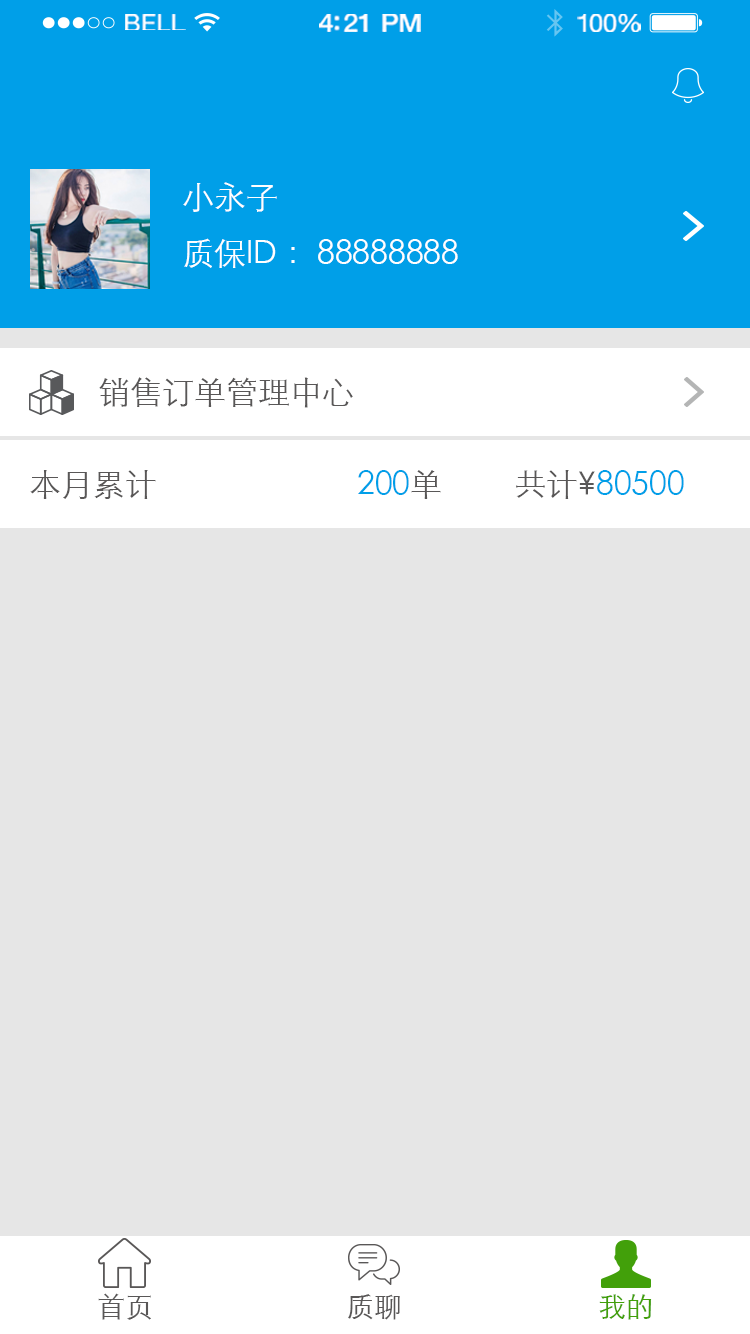
<style>
.page{position:relative;width:750px;height:1334px;background:#e6e6e6}
.page>*{position:absolute;margin:0}
.t1{font:23.3px "HelveticaNeue";letter-spacing:0.02em;color:#ffffff;scale:1.06 1}
.t2{font:25.3px "HelveticaNeue-Medium";letter-spacing:-0.02em;color:#ffffff;scale:1.06 1}
.t3{font:24.3px "HelveticaNeue";letter-spacing:-0.02em;color:#ffffff;scale:1.06 1}
.t4{font:32px/56px "STXihei";color:#ffffff}
.t5{font:32px "STXihei";color:#595757}
.t6{font:32px "STXihei";color:#009fe8}
.t7{font:28px "STXihei";color:#595757}
.t8{font:28px "STXihei";color:#42a00a}
</style>
<div class="page">
<p class="t1" style="left:125px;top:14px;width:61px;height:16px">BELL</p>
<p class="t2" style="left:319px;top:14px;width:102px;height:18px">4:21 PM</p>
<p class="t3" style="left:577px;top:14px;width:64px;height:18px">100%</p>
<p class="t4" style="left:183px;top:182px;width:275px;height:86px">小永子<br>质保ID ：88888888</p>
<p class="t5" style="left:99px;top:377px;width:254px;height:31px">销售订单管理中心</p>
<p class="t5" style="left:30px;top:470px;width:654px;height:29px">本月累计                         <span class="t6">200</span>单         共计¥<span class="t6">80500</span></p>
<p class="t7" style="left:98px;top:1293px;width:53px;height:27px">首页</p>
<p class="t7" style="left:348px;top:1294px;width:52px;height:26px">质聊</p>
<p class="t8" style="left:599px;top:1294px;width:53px;height:26px">我的</p>
</div>
